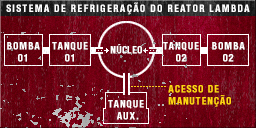
<style>
.page{position:relative;width:256px;height:128px}
.page>*{position:absolute;margin:0}
.t1{font:10px "HelveticaLT-Condensed-Black";letter-spacing:0.12em;color:#ffffff}
.t2{font:10px/12px "HelveticaLT-Condensed-Black";letter-spacing:0.08em;color:#ffffff}
.t3{font:10px "HelveticaLT-Condensed-Black";letter-spacing:0.02em;color:#ffffff}
.t4{font:10px/12px "HelveticaLT-Condensed-Black";letter-spacing:0.08em;color:#ffd610}
</style>
<div class="page">
<p class="t1" style="left:6px;top:2px;width:244px;height:13px">SISTEMA DE REFRIGERAÇÃO DO REATOR LAMBDA</p>
<p class="t2" style="left:7px;top:42px;width:33px;height:20px;text-align:center">BOMBA<br>01</p>
<p class="t2" style="left:52px;top:42px;width:36px;height:20px;text-align:center">TANQUE<br>01</p>
<p class="t3" style="left:110px;top:44px;width:32px;height:10px">NÚCLEO</p>
<p class="t2" style="left:163px;top:42px;width:36px;height:20px;text-align:center">TANQUE<br>02</p>
<p class="t2" style="left:212px;top:42px;width:33px;height:20px;text-align:center">BOMBA<br>02</p>
<p class="t4" style="left:168px;top:85px;width:63px;height:22px">ACESSO DE<br>MANUTENÇÃO</p>
<p class="t2" style="left:108px;top:100px;width:36px;height:20px;text-align:center">TANQUE<br> AUX.</p>
</div>
